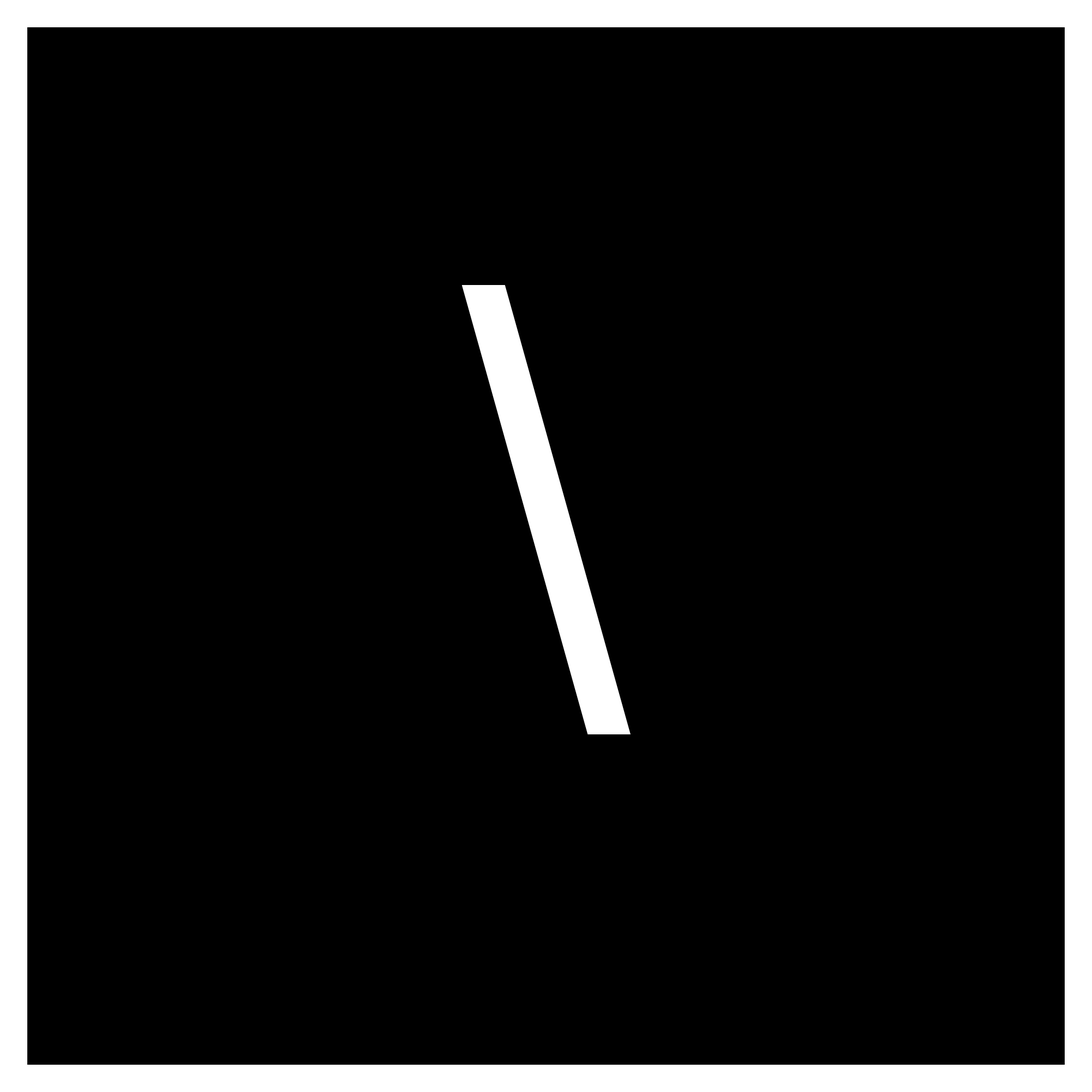
<style>
.page{position:relative;width:1092px;height:1092px;background:#000000}
.page>*{position:absolute;margin:0}
.t1{font:606.7px "ArialMT";color:#ffffff}
</style>
<div class="page">
<p class="t1" style="left:462px;top:285px;width:169px;height:449px">\</p>
</div>
